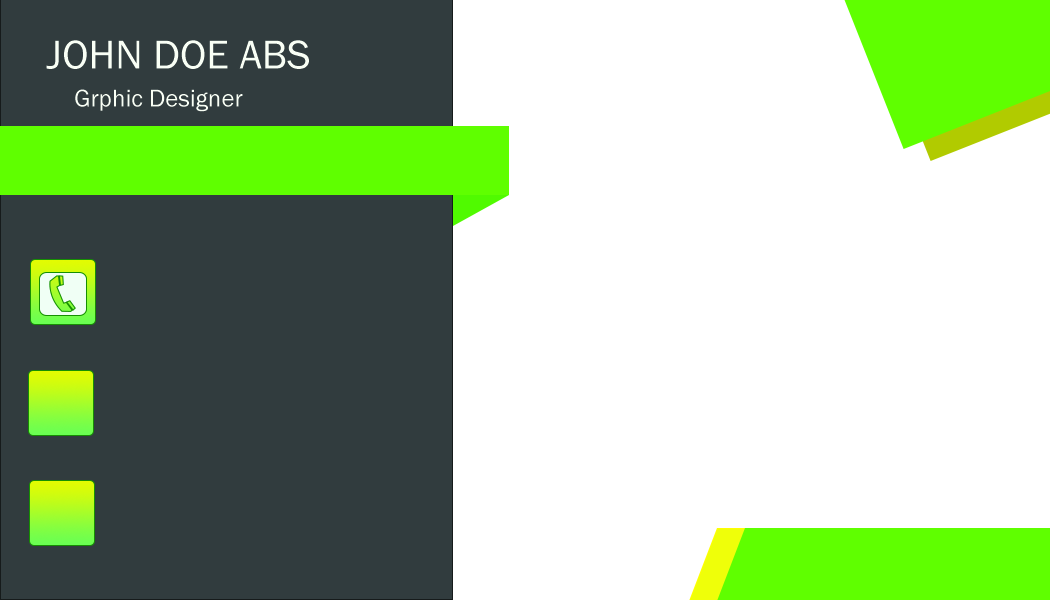
<style>
.page{position:relative;width:1050px;height:600px;background:#ffffff}
.page>*{position:absolute;margin:0}
.t1{font:41.7px "FranklinGothic-Book";color:#f9fff5}
.t2{font:25px "FranklinGothic-Book";color:#f9fff5}
</style>
<div class="page">
<p class="t1" style="left:46px;top:40px;width:263px;height:29px">JOHN DOE ABS</p>
<p class="t2" style="left:75px;top:89px;width:168px;height:23px">Grphic Designer</p>
</div>
